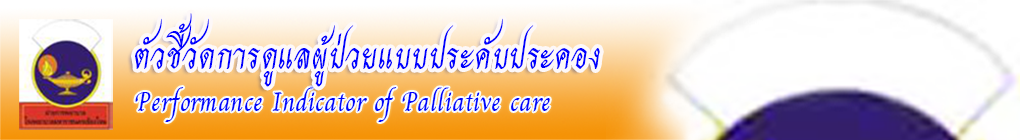
<style>
.page{position:relative;width:1020px;height:140px}
.page>*{position:absolute;margin:0}
.t1{font:50.9px "THCharmofAU";color:#0000fe}
.t2{font:38.2px "THCharmofAU";color:#0005fb}
</style>
<div class="page">
<p class="t1" style="left:135px;top:13px;width:465px;height:74px">ตัวชี้วัดการดูแลผู้ป่วยแบบประคับประคอง</p>
<p class="t2" style="left:135px;top:87px;width:415px;height:35px">Performance Indicator of Palliative care</p>
</div>
